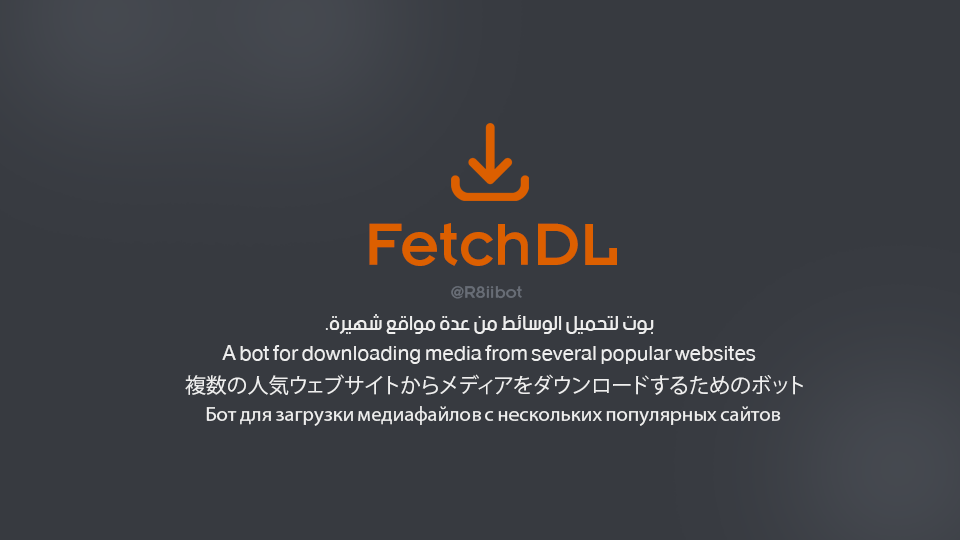
<style>
.page{position:relative;width:960px;height:540px;background:#373a40}
.page>*{position:absolute;margin:0}
.t1{font:75px "BoutrosART-Medium";color:#dc5f00}
.t2{font:20.8px "BoutrosART-Medium";color:#686d76}
.t3{font:20.8px "beINNormal";color:#eeeeee}
.t4{font:20.8px "KozGoPr6N-Regular";color:#eeeeee}
.t5{font:20.8px "MyriadPro-Regular";color:#eeeeee}
</style>
<div class="page">
<p class="t1" style="left:369px;top:223px;width:248px;height:43px">FetchDL</p>
<p class="t2" style="left:451px;top:286px;width:71px;height:13px">@R8iibot</p>
<p class="t3" style="left:325px;top:314px;width:329px;height:20px">بوت لتحميل الوسائط من عدة مواقع شهيرة.</p>
<p class="t3" style="left:222px;top:345px;width:534px;height:19px">A bot for downloading media from several popular websites</p>
<p class="t4" style="left:185px;top:374px;width:618px;height:21px">複数の人気ウェブサイトからメディアをダウンロードするためのボット</p>
<p class="t5" style="left:206px;top:406px;width:575px;height:20px">Бот для загрузки медиафайлов с нескольких популярных сайтов</p>
</div>
